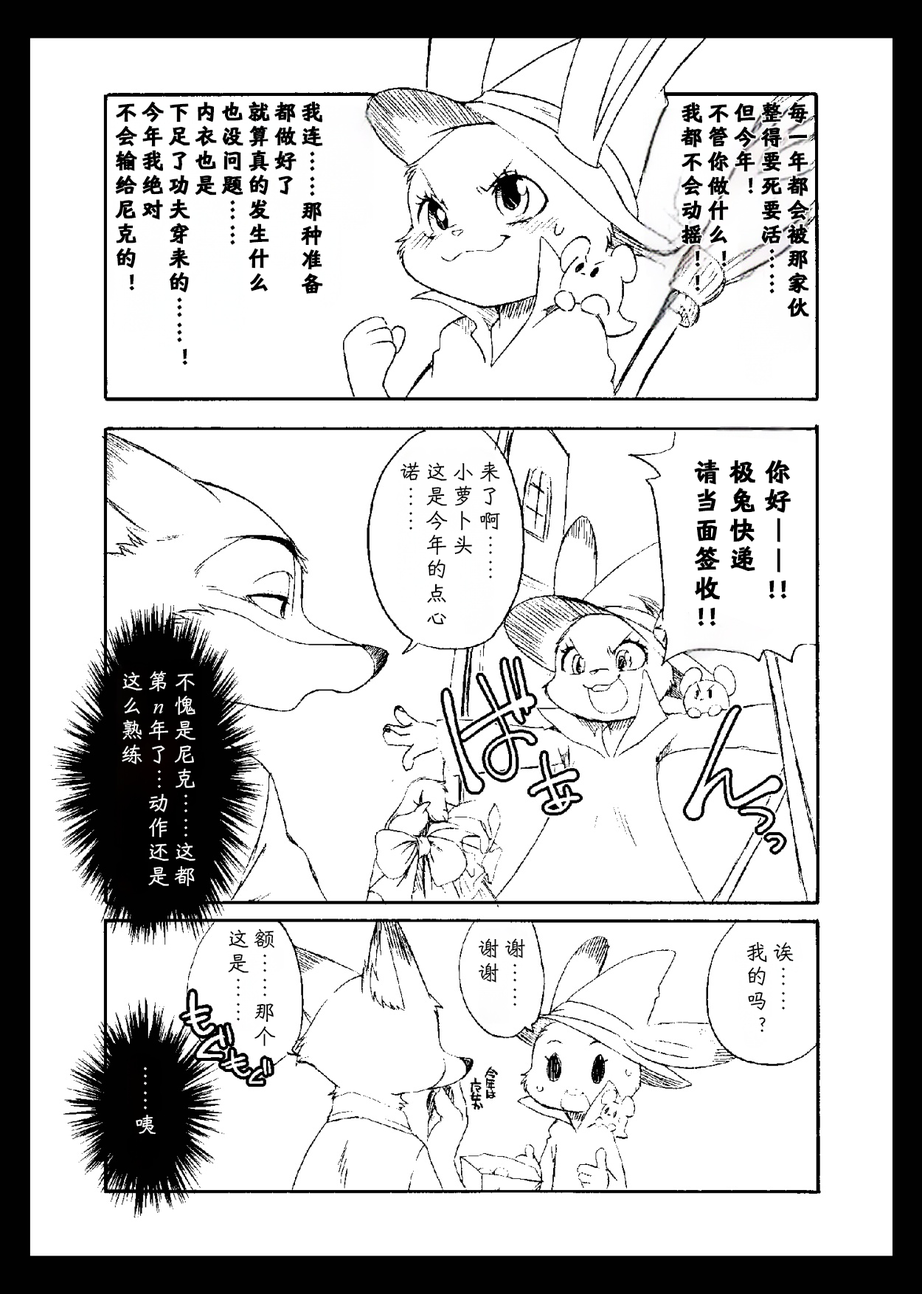
<style>
.page{position:relative;width:922px;height:1294px;background:#ffffff}
.page>*{position:absolute;margin:0}
.t1{font:22.1px/26.5px "HYShiWei75U";letter-spacing:0.1em;color:#000000;font-weight:bold}
.t2{font:22.1px/26.5px "HYShiWei55U";letter-spacing:0.1em;color:#000000}
.t3{font:26.5px/35.4px "HYShiWei75U";letter-spacing:0.1em;color:#000000;font-weight:bold}
.t4{font:26.5px "HYShiWei75U";letter-spacing:0.1em;color:#000000;font-weight:bold}
.t5{font:22.1px/26.5px "HYShiWei55U";letter-spacing:0.1em;color:#ffffff}
.t6{font:22.1px/26.5px "TimesNewRomanPS-ItalicMT";letter-spacing:0.1em;color:#ffffff}
</style>
<div class="page">
<p class="t1" style="left:115px;top:101px;width:208px;height:264px">我连……那种准备<br>都做好了<br>就算真的发生什么<br>也没问题……<br>内衣也是<br>下足了功夫穿来的……！<br>今年我绝对<br>不会输给尼克的！</p>
<p class="t1" style="left:681px;top:102px;width:128px;height:215px">每一年都会被那家伙<br>整得要死要活……<br>但今年！<br>不管你做什么！<br>我都不会动摇！！</p>
<p class="t2" style="left:400px;top:461px;width:100px;height:164px">来了啊……<br>小萝卜头<br>这是今年的点心<br>诺……</p>
<p class="t3" style="left:694px;top:459px;width:97px;height:141px">你好——<br>极兔快递<br>请当面签收</p>
<p class="t4" style="left:768px;top:580px;width:19px;height:19px">!!</p>
<p class="t4" style="left:698px;top:607px;width:18px;height:19px">!!</p>
<p class="t5" style="left:122px;top:670px;width:73px;height:216px">不愧是尼克……这都<br>第<span class="t6">n</span>年了…动作还是<br>这么熟练</p>
<p class="t2" style="left:228px;top:928px;width:48px;height:118px">额……那个<br>这是……</p>
<p class="t2" style="left:478px;top:938px;width:47px;height:68px">谢……<br>谢谢</p>
<p class="t2" style="left:746px;top:941px;width:48px;height:91px">诶……<br>我的吗？</p>
<p class="t5" style="left:136px;top:1066px;width:20px;height:68px">……咦</p>
</div>
